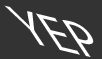
<style>
.page{position:relative;width:102px;height:59px;background:#333333}
.page>*{position:absolute;margin:0}
.t1{font:111.3px "MyriadPro-Regular";color:#ffffff;scale:0.83 1}
</style>
<div class="page">
<p class="t1" style="left:4px;top:5px;width:90px;height:52px;rotate:13deg">YEP</p>
</div>
